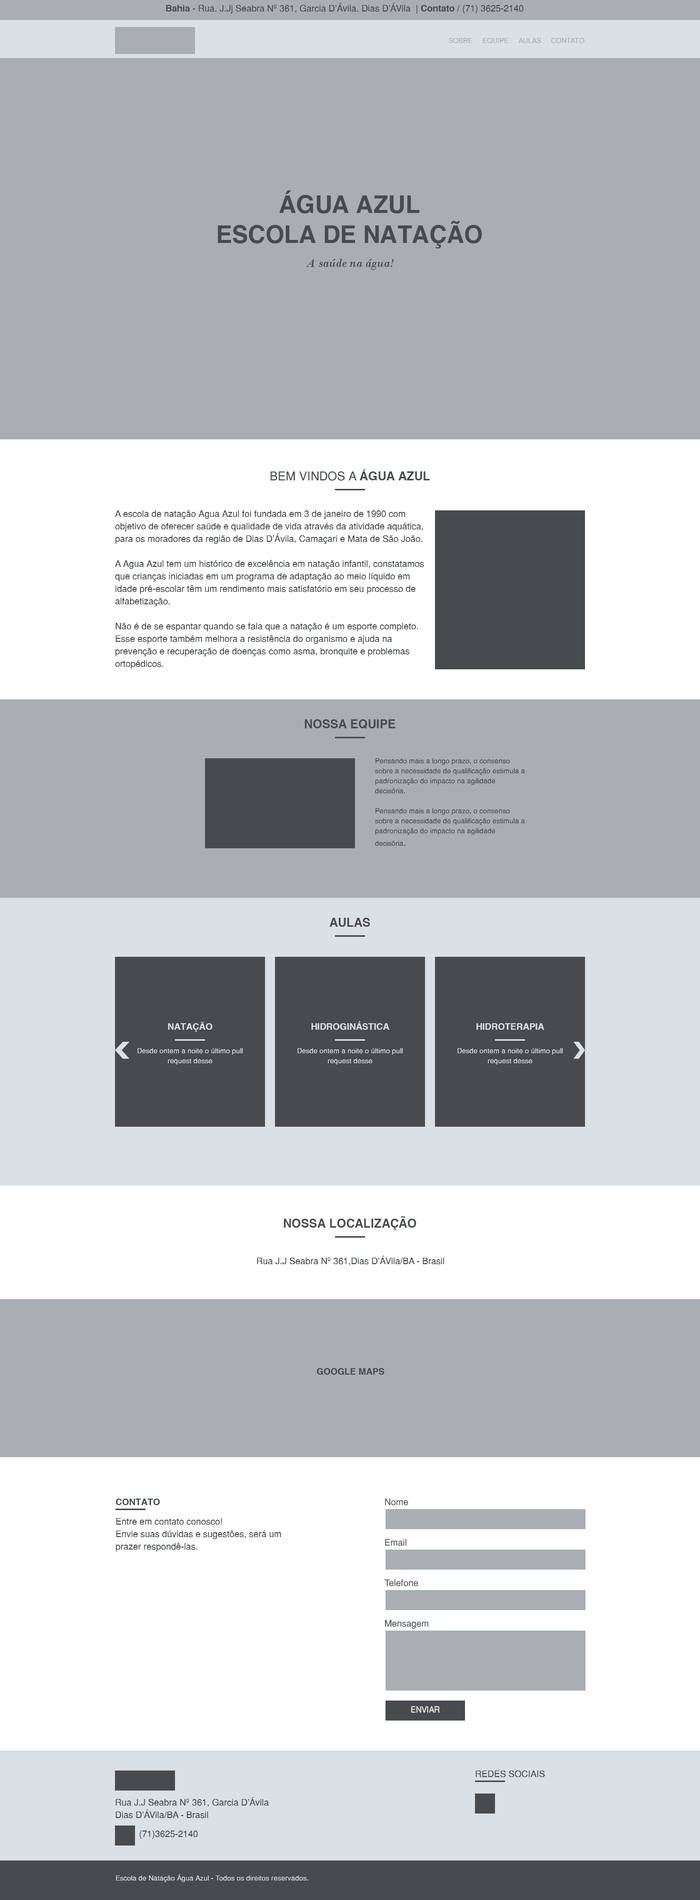
<style>
.page{position:relative;width:700px;height:1900px;background:#a9aeb3}
.page>*{position:absolute;margin:0}
.t1{font:9px "Helvetica-Normal";color:#484b4d}
.t2{font:9px "Helvetica-Bold";color:#484b4d}
.t3{font:7px "Helvetica-Normal";color:#a9aeb3;text-transform:uppercase}
.t4{font:24px/30px "Helvetica-Bold";color:#484b4d;text-transform:uppercase}
.t5{font:12.5px "BodoniMT-Italic";color:#484b4d}
.t6{font:12.1px "Helvetica-Normal";color:#484b4d;text-transform:uppercase}
.t7{font:12.1px "Helvetica-Bold";color:#484b4d;text-transform:uppercase}
.t8{font:9px/12.5px "Helvetica-Normal";color:#484b4d}
.t9{font:7px/10px "Helvetica-Normal";color:#484b4d}
.t10{font:9px "Helvetica-Bold";color:#d9e0e6;text-transform:uppercase}
.t11{font:7px/10px "Helvetica-Normal";color:#d9e0e6}
.t12{font:9px "Helvetica-Normal";color:#484b4d;text-transform:uppercase}
.t13{font:9px "Helvetica-Bold";color:#484b4d;text-transform:uppercase}
.t14{font:8.5px "Helvetica-Normal";color:#ffffff;text-transform:uppercase;scale:0.94 1}
.t15{font:9px/12.5px "Helvetica-Normal";color:#484b4d;text-transform:uppercase}
.t16{font:7px "Helvetica-Normal";color:#d9e0e6}
</style>
<div class="page">
<p class="t1" style="left:166px;top:3px;width:367px;height:11px"><span class="t2">Bahia</span> - Rua. J.Jj Seabra Nº 361, Garcia D'Ávila. Dias D'ÁVila  | <span class="t2">Contato</span> / (71) 3625-2140<span class="t3">as D'ÁVila</span></p>
<p class="t3" style="left:448px;top:38px;width:136px;height:6px">Sobre     Equipe     Aulas     Contato</p>
<p class="t4" style="left:218px;top:190px;width:264px;height:58px;text-align:center">água azul<br>escola de natação</p>
<p class="t5" style="left:306px;top:259px;width:88px;height:11px">A saúde na água!</p>
<p class="t6" style="left:270px;top:470px;width:160px;height:11px">bem vindos a <span class="t7">água azul</span></p>
<p class="t8" style="left:115px;top:510px;width:309px;height:159px">A escola de natação Agua Azul foi fundada em 3 de janeiro de 1990 com objetivo de oferecer saúde e qualidade de vida através da atividade aquática, para os moradores da região de Dias D’Ávila, Camaçari e Mata de São João.<br><br>A Agua Azul tem um histórico de excelência em natação infantil, constatamos que crianças iniciadas em um programa de adaptação ao meio líquido em idade pré-escolar têm um rendimento mais satisfatório em seu processo de alfabetização.<br><br>Não é de se espantar quando se fala que a natação é um esporte completo. Esse esporte também melhora a resistência do organismo e ajuda na prevenção e recuperação de doenças como asma, bronquite e problemas ortopédicos.</p>
<p class="t7" style="left:304px;top:720px;width:92px;height:9px">nossa equipe</p>
<p class="t9" style="left:375px;top:758px;width:150px;height:88px">Pensando mais a longo prazo, o consenso sobre a necessidade de qualificação estimula a padronização do impacto na agilidade decisória.<br><br>Pensando mais a longo prazo, o consenso sobre a necessidade de qualificação estimula a padronização do impacto na agilidade decisória<span class="t8">.</span></p>
<p class="t7" style="left:330px;top:918px;width:40px;height:9px">aulas</p>
<p class="t10" style="left:168px;top:1022px;width:44px;height:10px">Natação</p>
<p class="t10" style="left:312px;top:1022px;width:78px;height:8px">hidroginástica</p>
<p class="t10" style="left:476px;top:1024px;width:68px;height:6px">hidroterapia</p>
<p class="t11" style="left:138px;top:1048px;width:105px;height:17px;text-align:center">Desde ontem a noite o último pull request desse</p>
<p class="t11" style="left:298px;top:1048px;width:105px;height:17px;text-align:center">Desde ontem a noite o último pull request desse</p>
<p class="t11" style="left:458px;top:1048px;width:105px;height:17px;text-align:center">Desde ontem a noite o último pull request desse</p>
<p class="t7" style="left:284px;top:1216px;width:132px;height:14px">nossa localização</p>
<p class="t1" style="left:257px;top:1256px;width:187px;height:10px"><span class="t12">R</span>ua J.J Seabra Nº 361,Dias D'ÁVila/BA - Brasil</p>
<p class="t2" style="left:316px;top:1368px;width:68px;height:7px">GOOGLE MAPS</p>
<p class="t13" style="left:116px;top:1499px;width:44px;height:7px">Contato</p>
<p class="t1" style="left:385px;top:1498px;width:23px;height:8px">Nome</p>
<p class="t8" style="left:116px;top:1518px;width:165px;height:34px">Entre em contato conosco!<br>Envie suas dúvidas e sugestões, será um prazer respondê-las.</p>
<p class="t1" style="left:385px;top:1539px;width:21px;height:7px">Email</p>
<p class="t1" style="left:384px;top:1580px;width:34px;height:7px">Telefone</p>
<p class="t1" style="left:385px;top:1620px;width:43px;height:10px">Mensagem</p>
<p class="t14" style="left:411px;top:1706px;width:29px;height:8px">enviar</p>
<p class="t12" style="left:476px;top:1771px;width:69px;height:7px">Redes sociais</p>
<p class="t8" style="left:116px;top:1798px;width:153px;height:21px"><span class="t15">R</span>ua J.J Seabra Nº 361, Garcia D'Ávila<br>Dias D'ÁVila/BA - Brasil</p>
<p class="t1" style="left:140px;top:1831px;width:58px;height:9px">(71)3625-2140</p>
<p class="t16" style="left:116px;top:1874px;width:192px;height:8px">Escola de Natação Água Azul - Todos os direitos reservados.</p>
</div>
